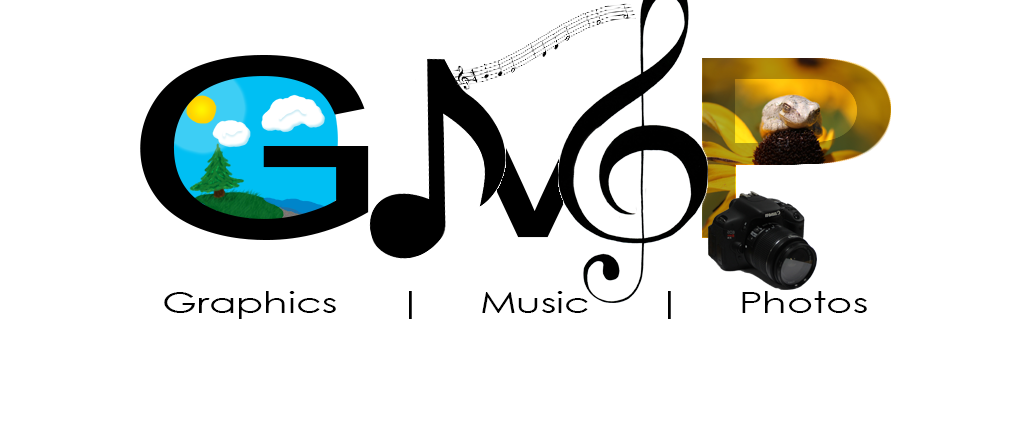
<style>
.page{position:relative;width:1009px;height:441px;background:#ffffff}
.page>*{position:absolute;margin:0}
.t1{font:29.1px "CenturyGothic";color:#000000;scale:1.37 1}
</style>
<div class="page">
<p class="t1" style="left:164px;top:291px;width:703px;height:28px">Graphics      |     Music      |     Photos</p>
</div>
